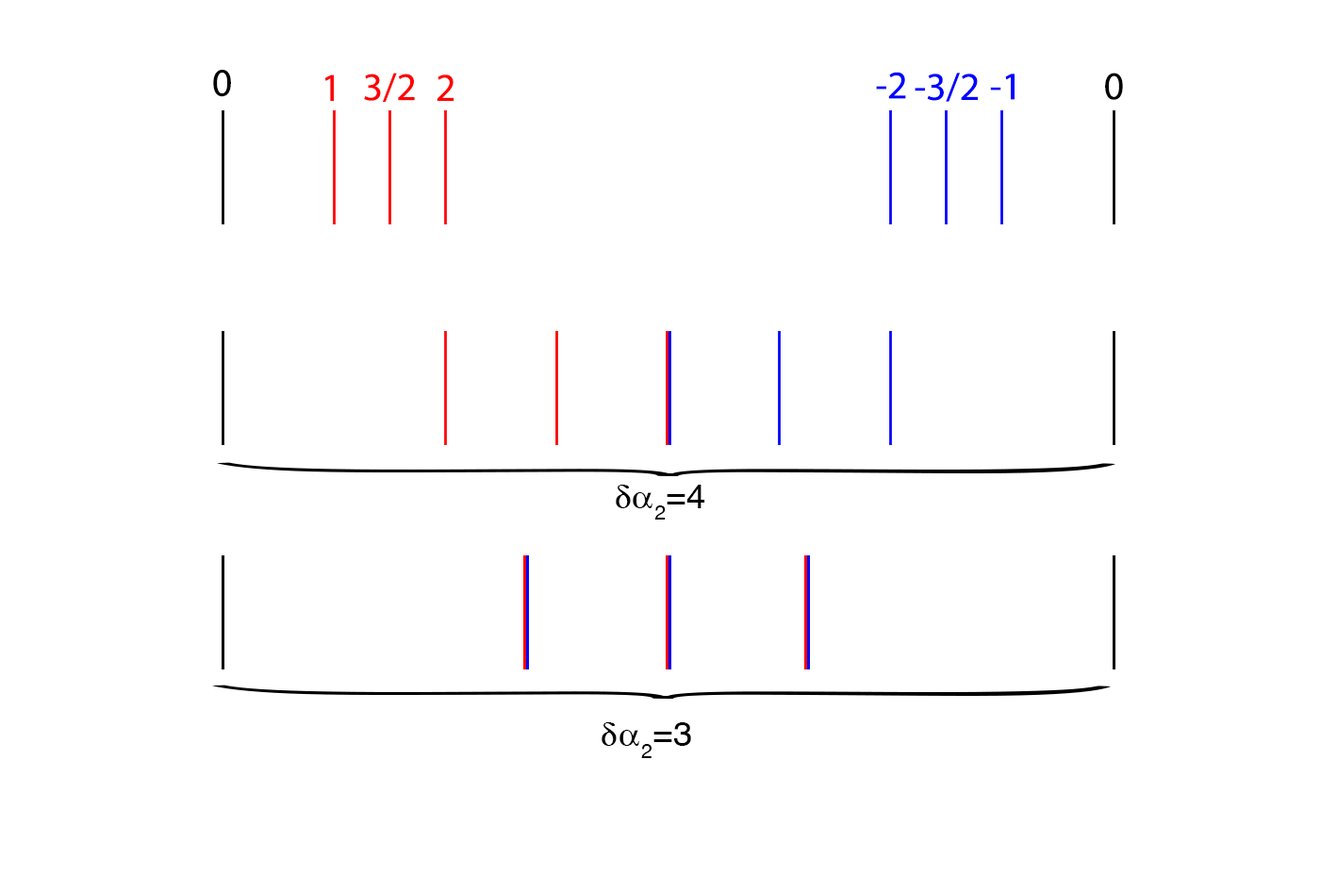
<style>
.page{position:relative;width:1337px;height:892px;background:#ffffff}
.page>*{position:absolute;margin:0}
.t1{font:39.3px "MyriadPro-Regular";color:#000000}
.t2{font:39.3px "MyriadPro-Regular";color:#ff0000}
.t3{font:39.3px "MyriadPro-Regular";color:#0000ff}
.t4{font:35.4px "Vektor";color:#000000}
</style>
<div class="page">
<p class="t1" style="left:213px;top:70px;width:18px;height:27px">0</p>
<p class="t2" style="left:324px;top:74px;width:10px;height:27px">1</p>
<p class="t2" style="left:364px;top:73px;width:51px;height:29px">3/2</p>
<p class="t2" style="left:437px;top:74px;width:17px;height:27px">2</p>
<p class="t3" style="left:876px;top:72px;width:30px;height:27px">-2</p>
<p class="t3" style="left:915px;top:73px;width:63px;height:29px">-3/2</p>
<p class="t3" style="left:990px;top:74px;width:24px;height:26px">-1</p>
<p class="t1" style="left:1105px;top:73px;width:18px;height:27px">0</p>
<p class="t4" style="left:616px;top:485px;width:89px;height:34px">da2=4</p>
<p class="t4" style="left:602px;top:722px;width:89px;height:36px">da2=3</p>
</div>
